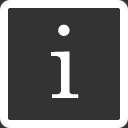
<style>
.page{position:relative;width:128px;height:128px;background:#333333}
.page>*{position:absolute;margin:0}
.t1{font:100.3px "Century";letter-spacing:0.05em;color:#ffffff}
</style>
<div class="page">
<p class="t1" style="left:51px;top:24px;width:28px;height:74px">i</p>
</div>
